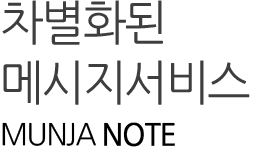
<style>
.page{position:relative;width:270px;height:160px;background:#ffffff}
.page>*{position:absolute;margin:0}
.t1{font:48px/60px "NanumGothic";letter-spacing:-0.05em;color:#3e3e3e;scale:0.97 1}
.t2{font:30px/60px "NanumGothic";letter-spacing:-0.05em;color:#000000;scale:0.97 1}
.t3{font:30px/60px "NanumGothic";letter-spacing:-0.05em;color:#000000;font-weight:bold;scale:0.97 1}
</style>
<div class="page">
<p class="t1" style="left:2px;top:0px;width:248px;height:147px">차별화된 <br>메시지서비스<br><span class="t2">MUNJA </span><span class="t3">NOTE</span></p>
</div>
